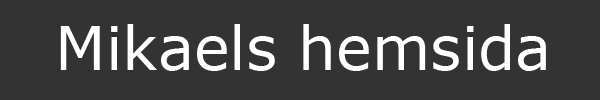
<style>
.page{position:relative;width:600px;height:100px;background:#333333}
.page>*{position:absolute;margin:0}
.t1{font:60px "Verdana";color:#ffffff}
</style>
<div class="page">
<p class="t1" style="left:60px;top:24px;width:486px;height:47px">Mikaels hemsida</p>
</div>
